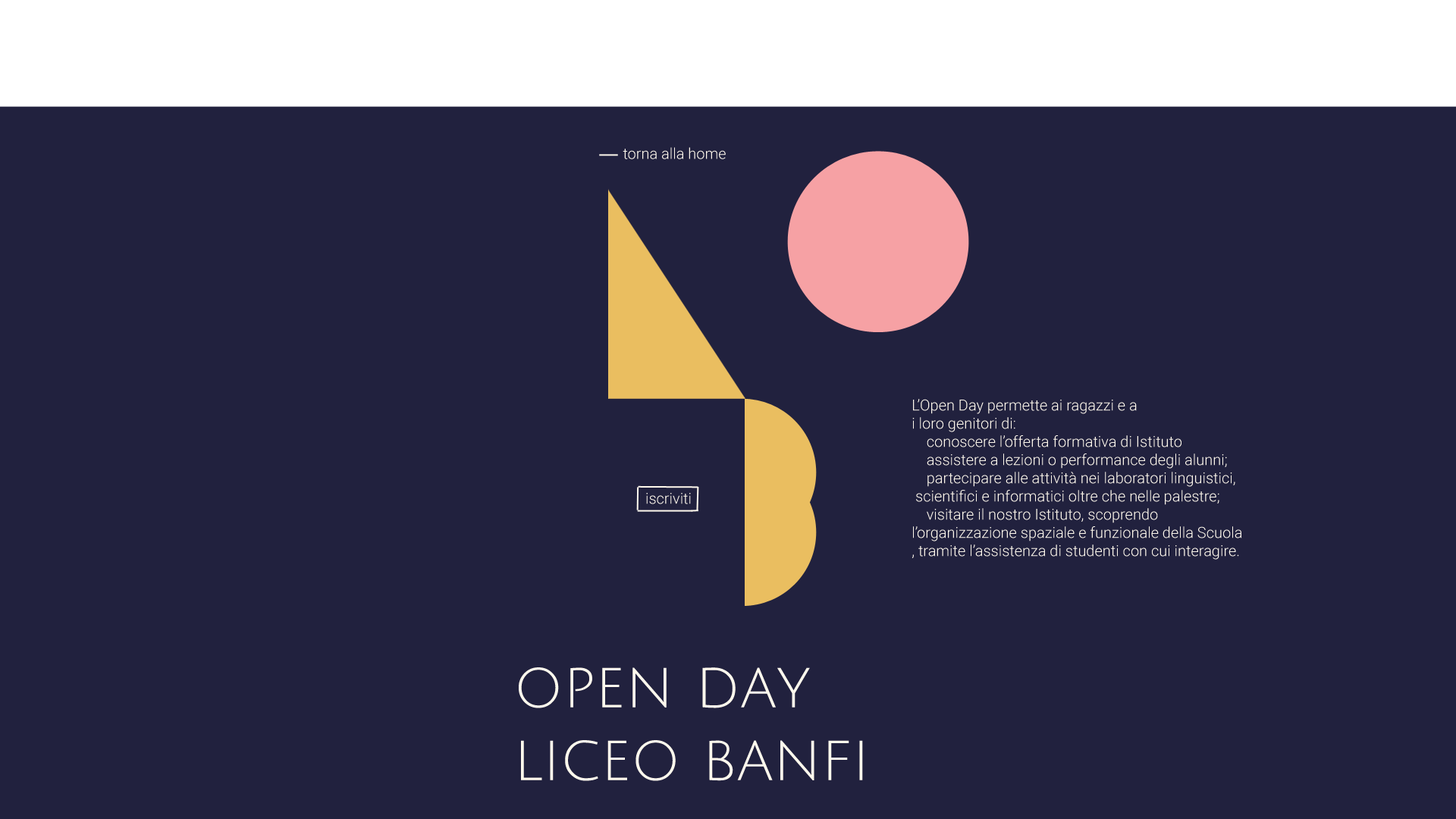
<style>
.page{position:relative;width:1456px;height:819px;background:#21213e}
.page>*{position:absolute;margin:0}
.t1{font:15.2px "Roboto-Light";color:#fff9ed}
.t2{font:60.7px "JuliusSansOne-Regular";color:#fff9ed}
</style>
<div class="page">
<p class="t1" style="left:623px;top:147px;width:103px;height:12px">torna alla home</p>
<p class="t1" style="left:912px;top:399px;width:330px;height:161px">L’Open Day permette ai ragazzi e a<br>i loro genitori di:<br>    conoscere l’offerta formativa di Istituto<br>    assistere a lezioni o performance degli alunni;<br>    partecipare alle attività nei laboratori linguistici,<br> scientifici e informatici oltre che nelle palestre;<br>    visitare il nostro Istituto, scoprendo <br>l’organizzazione spaziale e funzionale della Scuola<br>, tramite l’assistenza di studenti con cui interagire.</p>
<p class="t1" style="left:646px;top:493px;width:45px;height:11px">iscriviti</p>
<p class="t2" style="left:519px;top:667px;width:344px;height:114px">open day<br>liceo banfi</p>
</div>
